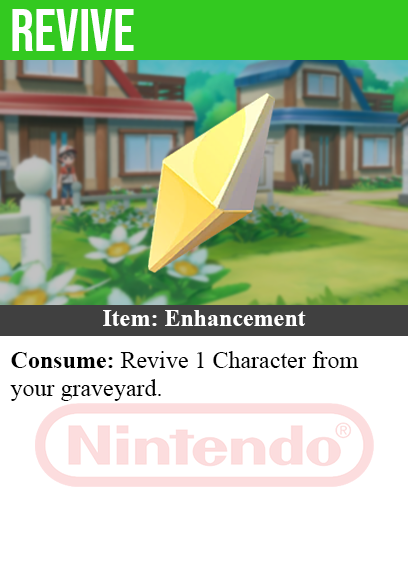
<style>
.page{position:relative;width:408px;height:585px;background:#ffffff}
.page>*{position:absolute;margin:0}
.t1{font:60px "BebasNeue-Regular";color:#ffffff}
.t2{font:24px "TimesNewRomanPS-BoldMT";color:#ffffff}
.t3{font:24px "TimesNewRomanPSMT";color:#000000}
.t4{font:24px "TimesNewRomanPS-BoldMT";color:#000000}
</style>
<div class="page">
<p class="t1" style="left:12px;top:9px;width:122px;height:42px">revive</p>
<p class="t2" style="left:103px;top:310px;width:203px;height:16px">Item: Enhancement</p>
<p class="t3" style="left:10px;top:351px;width:349px;height:50px"><span class="t4">Consume:</span> Revive 1 Character from<br>your graveyard.</p>
</div>
